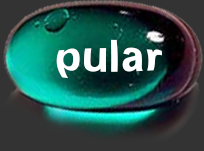
<style>
.page{position:relative;width:204px;height:151px;background:#333333}
.page>*{position:absolute;margin:0}
.t1{font:35.6px "Arial-BoldMT";color:#ffffff}
</style>
<div class="page">
<p class="t1" style="left:56px;top:39px;width:106px;height:40px">pular</p>
</div>
